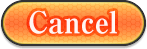
<style>
.page{position:relative;width:147px;height:49px}
.page>*{position:absolute;margin:0}
.t1{font:30px "RyuminPro-ExBold";color:#fff6f2;scale:0.95 1}
</style>
<div class="page">
<p class="t1" style="left:29px;top:10px;width:88px;height:24px">Cancel</p>
</div>
